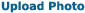
<style>
.page{position:relative;width:85px;height:13px;background:#ffffff}
.page>*{position:absolute;margin:0}
.t1{font:11.1px "Verdana-Bold";color:#0f628b}
</style>
<div class="page">
<p class="t1" style="left:1px;top:1px;width:84px;height:12px">Upload Photo</p>
</div>
